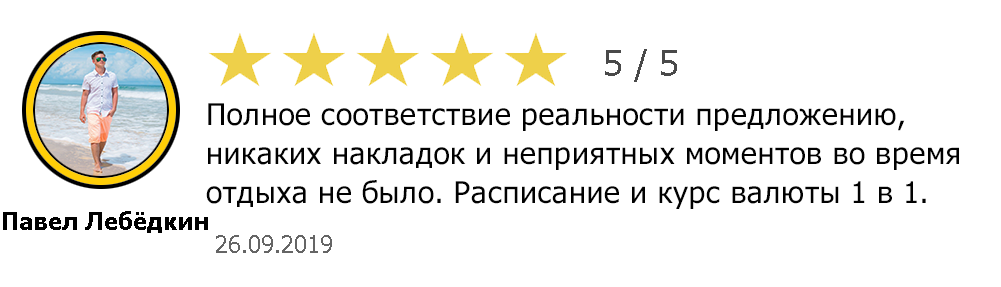
<style>
.page{position:relative;width:1001px;height:287px;background:#ffffff}
.page>*{position:absolute;margin:0}
.t1{font:36px "Tahoma";color:#494949}
.t2{font:30px/19.5px "Tahoma";letter-spacing:0.02em;color:#010101}
.t3{font:24px "Tahoma-Bold";color:#000000}
.t4{font:24px "Tahoma";color:#656565}
</style>
<div class="page">
<p class="t1" style="left:605px;top:49px;width:72px;height:33px">5 / 5</p>
<p class="t2" style="left:206px;top:103px;width:753px;height:106px">Полное соответствие реальности предложению, <br><br>никаких накладок и неприятных моментов во время <br><br>отдыха не было. Расписание и курс валюты 1 в 1.</p>
<p class="t3" style="left:3px;top:211px;width:205px;height:22px">Павел Лебёдкин</p>
<p class="t4" style="left:216px;top:235px;width:116px;height:18px">26.09.2019</p>
</div>
